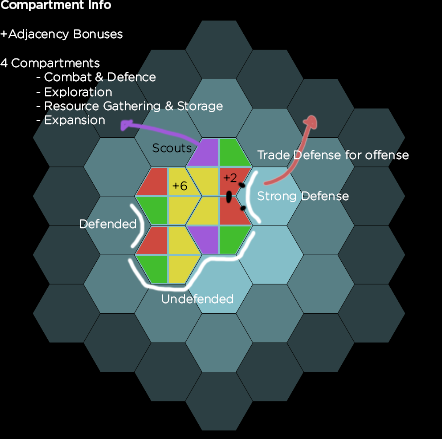
<style>
.page{position:relative;width:442px;height:439px;background:#000000}
.page>*{position:absolute;margin:0}
.t1{font:12px "Gotham-Light";color:#ffffff}
.t2{font:12px "Gotham-Medium";color:#ffffff}
.t3{font:12px "Gotham-Light";color:#000000}
</style>
<div class="page">
<p class="t1" style="left:0px;top:0px;width:223px;height:126px"><span class="t2">Compartment Info<br><br></span>+Adjacency Bonuses<br><br>4 Compartments<br> - Combat &amp; Defence<br> - Exploration<br> - Resource Gathering &amp; Storage<br> - Expansion</p>
<p class="t3" style="left:152px;top:143px;width:40px;height:10px">Scouts</p>
<p class="t1" style="left:257px;top:150px;width:152px;height:10px">Trade Defense for offense</p>
<p class="t3" style="left:223px;top:173px;width:14px;height:10px">+2</p>
<p class="t3" style="left:172px;top:181px;width:15px;height:10px">+6</p>
<p class="t1" style="left:257px;top:191px;width:92px;height:11px">Strong Defense</p>
<p class="t1" style="left:80px;top:219px;width:56px;height:10px">Defended</p>
<p class="t1" style="left:162px;top:294px;width:71px;height:10px">Undefended</p>
</div>
